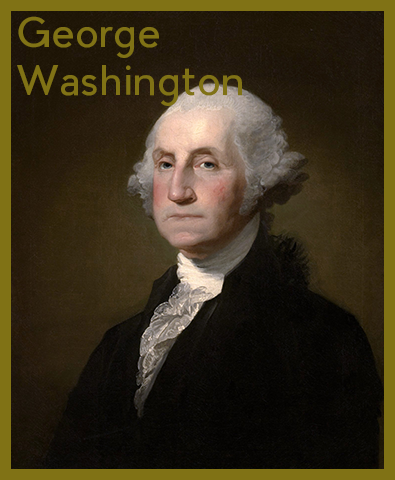
<style>
.page{position:relative;width:395px;height:480px}
.page>*{position:absolute;margin:0}
.t1{font:40px "PierSans";color:#807215}
</style>
<div class="page">
<p class="t1" style="left:17px;top:16px;width:225px;height:90px">George<br>Washington</p>
</div>
